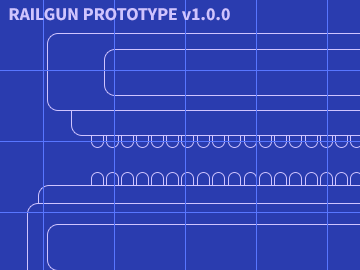
<style>
.page{position:relative;width:360px;height:270px;background:#2a3caf}
.page>*{position:absolute;margin:0}
.t1{font:18px "SourceSansPro-Bold";color:#cfc4ff}
</style>
<div class="page">
<p class="t1" style="left:9px;top:8px;width:221px;height:13px">RAILGUN PROTOTYPE v1.0.0</p>
</div>
